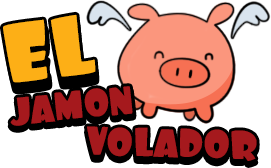
<style>
.page{position:relative;width:271px;height:168px;background:#ffffff}
.page>*{position:absolute;margin:0}
.t1{font:86px "Foo-Regular";color:#fdaf16}
.t2{font:39.4px "Foo-Regular";color:#a5191d}
.t3{font:40.6px "Foo-Regular";color:#a5191d}
</style>
<div class="page">
<p class="t1" style="left:3px;top:14px;width:93px;height:69px;rotate:-7deg">EL</p>
<p class="t1" style="left:5px;top:24px;width:92px;height:68px;rotate:-7deg">EL</p>
<p class="t2" style="left:10px;top:86px;width:123px;height:40px;rotate:-6deg">JAMON</p>
<p class="t3" style="left:87px;top:126px;width:170px;height:35px;rotate:1deg">VOLADOR</p>
</div>
